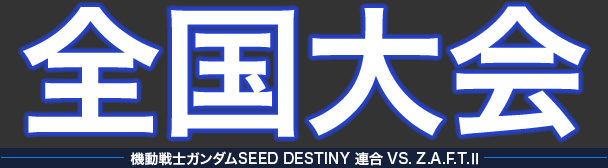
<style>
.page{position:relative;width:608px;height:168px;background:#333333}
.page>*{position:absolute;margin:0}
.t1{font:142px "HiraKakuPro-W6";color:#ffffff}
.t2{font:14px "HiraKakuPro-W6";color:#ffffff}
</style>
<div class="page">
<p class="t1" style="left:23px;top:6px;width:563px;height:132px">全国大会</p>
<p class="t2" style="left:130px;top:151px;width:348px;height:15px">機動戦士ガンダムSEED DESTINY 連合 VS. Z.A.F.T.Ⅱ</p>
</div>
